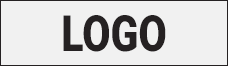
<style>
.page{position:relative;width:228px;height:66px;background:#f1f1f1}
.page>*{position:absolute;margin:0}
.t1{font:50px "Roboto-Black";color:#252122;scale:0.82 1}
</style>
<div class="page">
<p class="t1" style="left:63px;top:15px;width:103px;height:37px">LOGO</p>
</div>
